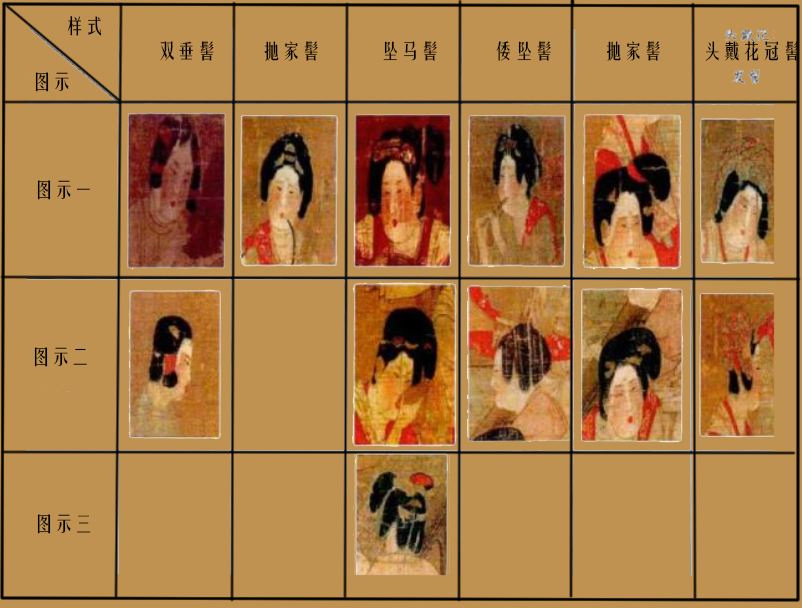
<style>
.page{position:relative;width:802px;height:608px;background:#bf9251}
.page>*{position:absolute;margin:0}
.t1{font:12px "FZYTK--GBK1-0";color:#000000}
.t2{font:19.8px "FZYTK--GBK1-0";color:#000000}
</style>
<div class="page">
<p class="t1" style="left:67px;top:16px;width:35px;height:20px">样式</p>
<p class="t2" style="left:160px;top:41px;width:639px;height:20px">双垂髻         抛家髻            坠马髻           倭坠髻          抛家髻        头戴花冠髻</p>
<p class="t1" style="left:35px;top:72px;width:34px;height:20px">图示</p>
<p class="t1" style="left:37px;top:180px;width:53px;height:20px">图示一</p>
<p class="t1" style="left:34px;top:347px;width:53px;height:20px">图示二</p>
<p class="t1" style="left:37px;top:514px;width:54px;height:20px">图示三</p>
</div>
